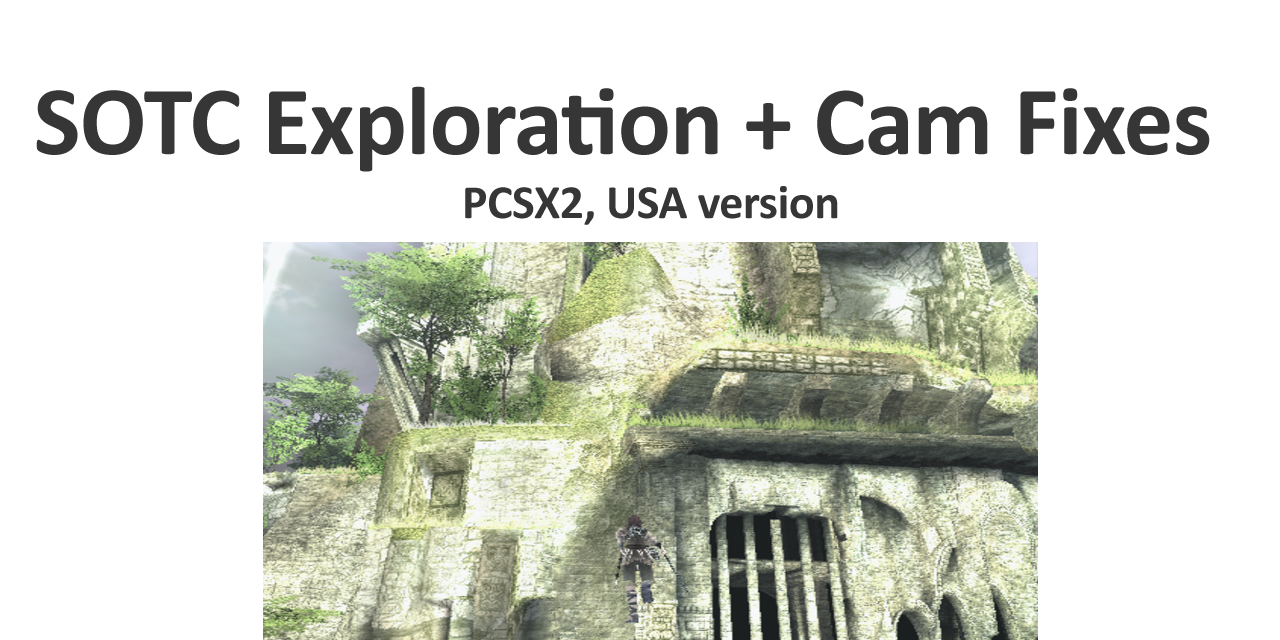
<style>
.page{position:relative;width:1280px;height:640px;background:#ffffff}
.page>*{position:absolute;margin:0}
.t1{font:99.1px "Calibri-Bold";letter-spacing:-0.01em;color:#363636}
.t2{font:48px "Calibri-Bold";letter-spacing:-0.01em;color:#363636}
</style>
<div class="page">
<p class="t1" style="left:36px;top:86px;width:1174px;height:86px">SOTC Exploration + Cam Fixes</p>
<p class="t2" style="left:465px;top:186px;width:373px;height:39px">PCSX2, USA version</p>
</div>
